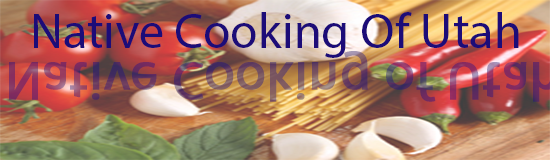
<style>
.page{position:relative;width:550px;height:160px}
.page>*{position:absolute;margin:0}
.t1{font:50px "MyriadPro-Regular";color:#1c0c78}
</style>
<div class="page">
<p class="t1" style="left:34px;top:12px;width:485px;height:46px">Native Cooking Of Utah</p>
</div>
